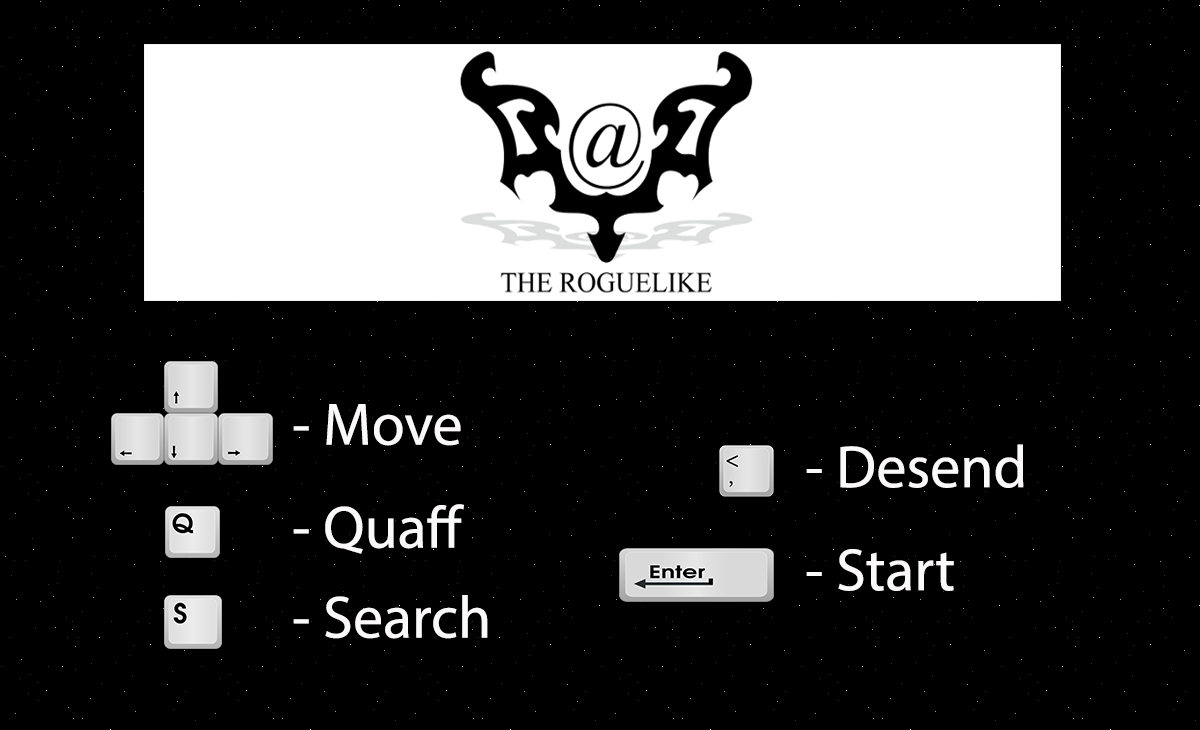
<style>
.page{position:relative;width:1200px;height:730px;background:#000000}
.page>*{position:absolute;margin:0}
.t1{font:60px "MyriadPro-Regular";color:#fbf9f9}
</style>
<div class="page">
<p class="t1" style="left:293px;top:404px;width:168px;height:42px">- Move</p>
<p class="t1" style="left:806px;top:444px;width:218px;height:44px">- Desend</p>
<p class="t1" style="left:293px;top:504px;width:171px;height:50px">- Quaff</p>
<p class="t1" style="left:806px;top:549px;width:148px;height:42px">- Start</p>
<p class="t1" style="left:293px;top:595px;width:195px;height:44px">- Search</p>
</div>
